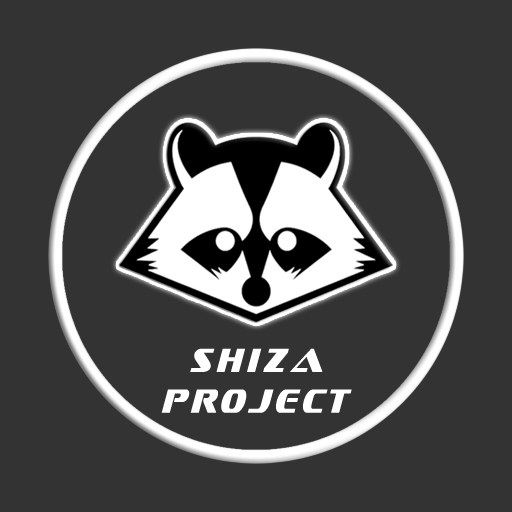
<style>
.page{position:relative;width:512px;height:512px;background:#333333}
.page>*{position:absolute;margin:0}
.t1{font:34px "cyr_DSSofachrome-Italic";color:#ffffff;scale:0.6 1}
</style>
<div class="page">
<p class="t1" style="left:161px;top:348px;width:191px;height:65px;text-align:center">Shiza<br>project</p>
</div>
